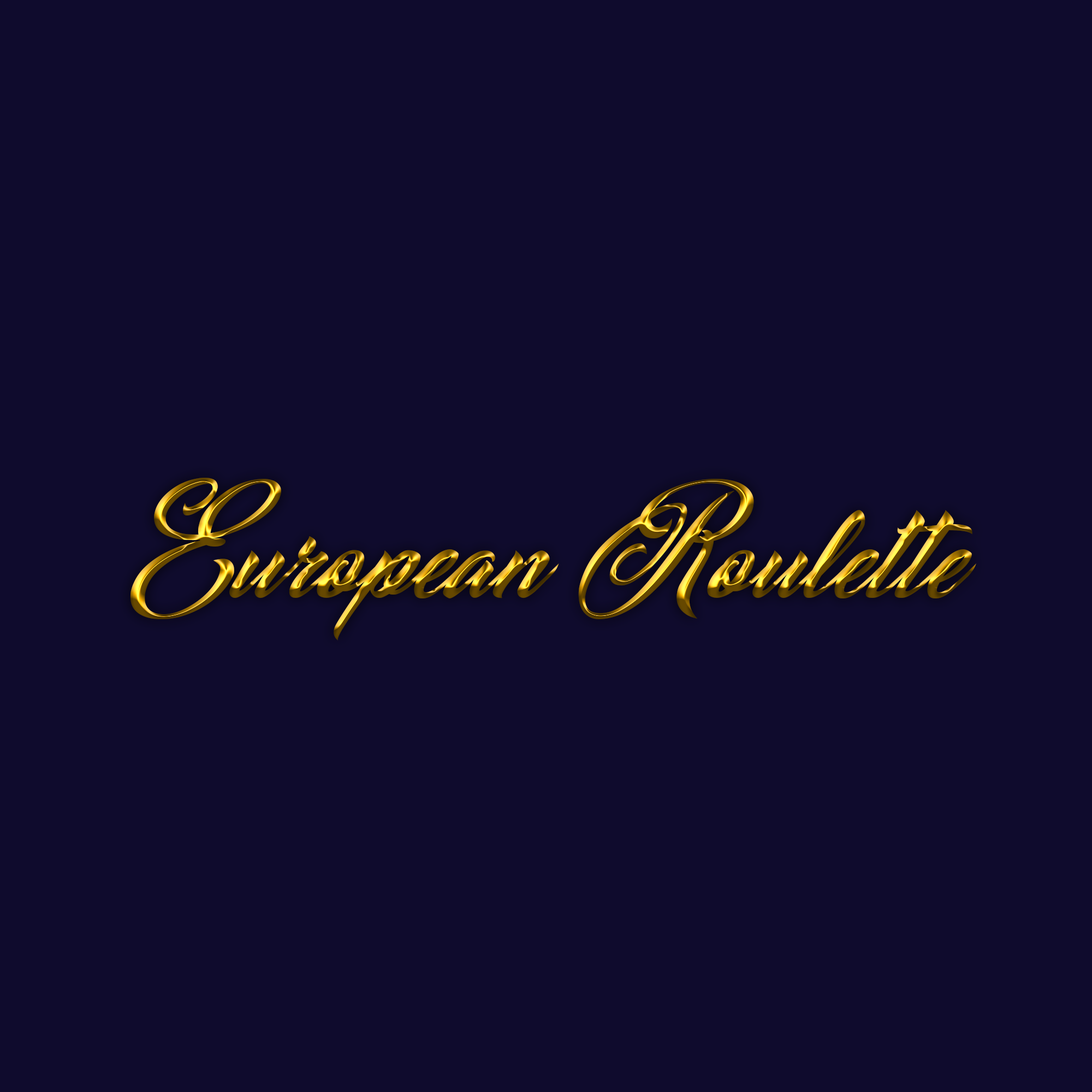
<style>
.page{position:relative;width:1092px;height:1092px;background:#0f0b2d}
.page>*{position:absolute;margin:0}
.t1{font:131px "CADILLACPERSONALUSE-Italic"}
</style>
<div class="page">
<p class="t1" style="left:130px;top:478px;width:846px;height:162px">European Roulette</p>
</div>
